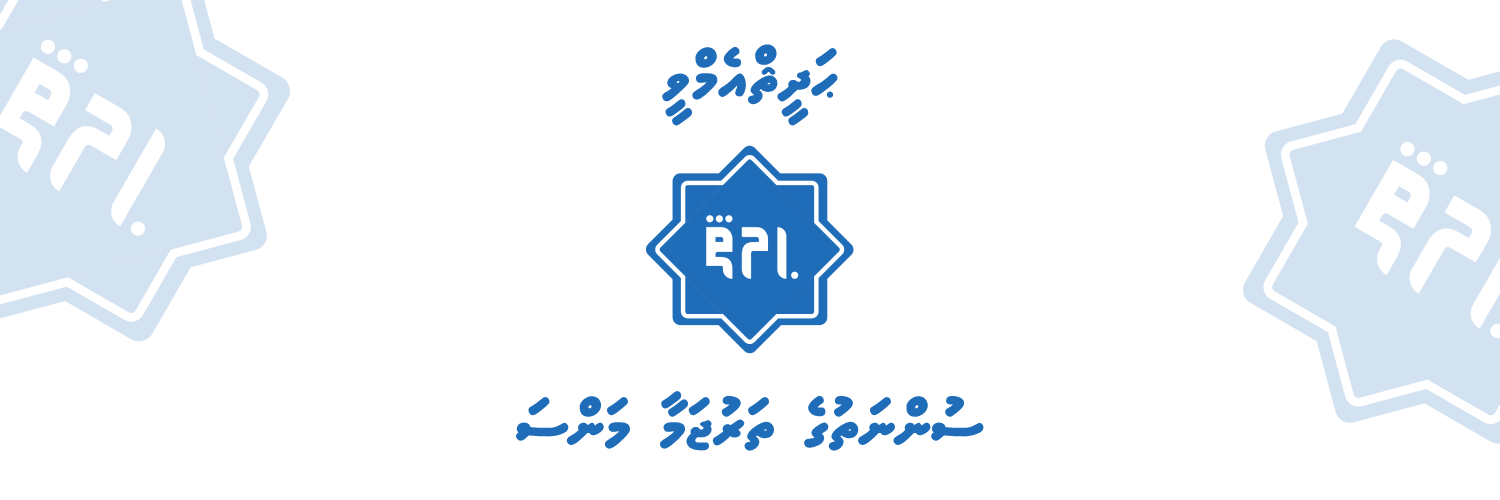
<style>
.page{position:relative;width:1500px;height:500px;background:#ffffff}
.page>*{position:absolute;margin:0}
.t1{font:58px "MVAaamuFK";color:#1f6cb9}
</style>
<div class="page">
<p class="t1" style="left:662px;top:44px;width:176px;height:82px">ޙަދީޘްއެމްވީ</p>
<p class="t1" style="left:515px;top:391px;width:469px;height:60px">ސުންނަތުގެ ތަރުޖަމާ މަންސަ</p>
</div>
